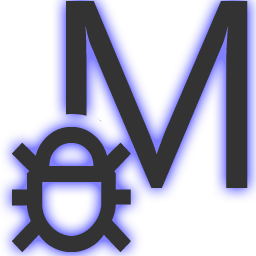
<style>
.page{position:relative;width:256px;height:256px;background:#ffffff}
.page>*{position:absolute;margin:0}
.t1{font:266.7px "SegoeUI";color:#333333;scale:0.95 1}
</style>
<div class="page">
<p class="t1" style="left:66px;top:1px;width:182px;height:187px">M</p>
</div>
